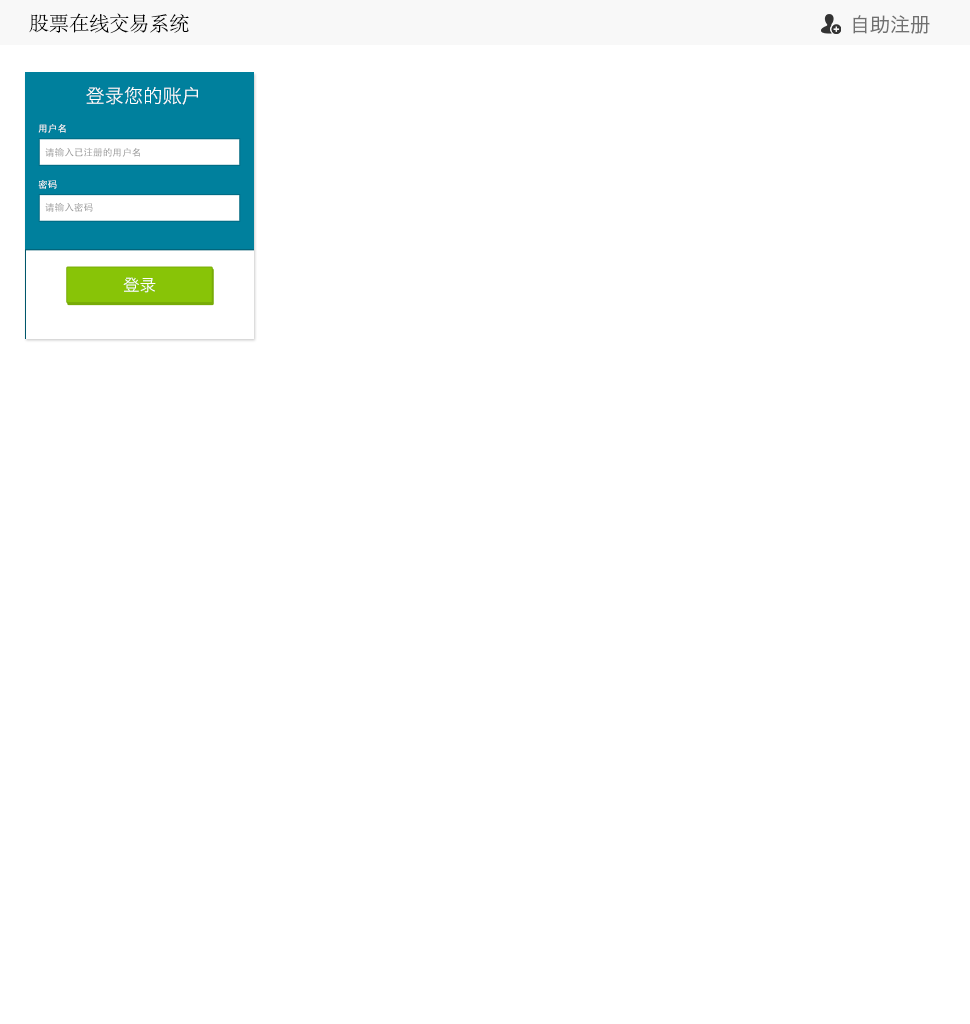
<style>
.page{position:relative;width:970px;height:1024px;background:#ffffff}
.page>*{position:absolute;margin:0}
.t1{font:20px "AdobeSongStd-Light";color:#000000}
.t2{font:20px "HiraginoSansGB-W3";color:#707070}
.t3{font:19.3px "HiraginoSansGB-W3";color:#ffffff}
.t4{font:9.7px "AdobeHeitiStd-Regular";color:#ffffff}
.t5{font:9.7px "AdobeHeitiStd-Regular";color:#999999}
.t6{font:16.6px "HiraginoSansGB-W3";color:#ffffff}
</style>
<div class="page">
<p class="t1" style="left:29px;top:13px;width:160px;height:21px">股票在线交易系统</p>
<p class="t2" style="left:853px;top:15px;width:77px;height:19px">自助注册</p>
<p class="t3" style="left:86px;top:86px;width:112px;height:19px">登录您的账户</p>
<p class="t4" style="left:38px;top:124px;width:28px;height:9px">用户名</p>
<p class="t5" style="left:45px;top:147px;width:95px;height:10px">请输入已注册的用户名</p>
<p class="t4" style="left:38px;top:180px;width:19px;height:9px">密码</p>
<p class="t5" style="left:45px;top:202px;width:48px;height:10px">请输入密码</p>
<p class="t6" style="left:123px;top:277px;width:33px;height:16px">登录</p>
</div>
